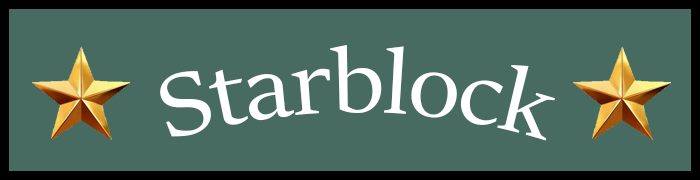
<style>
.page{position:relative;width:700px;height:180px;background:#476b61}
.page>*{position:absolute;margin:0}
.t1{font:100px "SitkaBanner";color:#ffffff}
</style>
<div class="page">
<p class="t1" style="left:160px;top:45px;width:395px;height:96px">Starblock</p>
</div>
